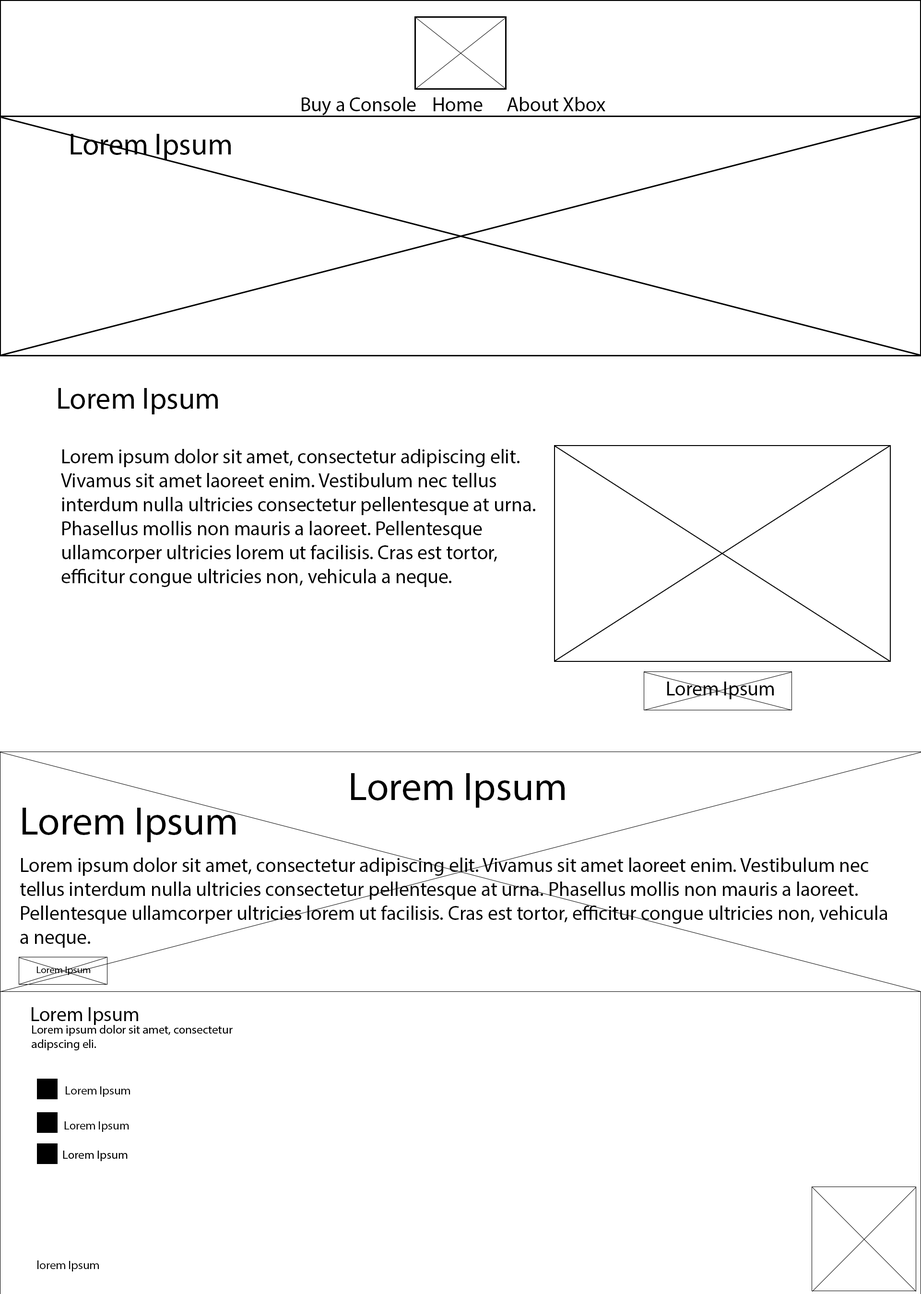
<style>
.page{position:relative;width:921px;height:1294px;background:#ffffff}
.page>*{position:absolute;margin:0}
.t1{font:20px "MyriadPro-Regular";color:#000000}
.t2{font:30px "MyriadPro-Regular";color:#000000}
.t3{font:40px "MyriadPro-Regular";color:#000000}
.t4{font:10px "MyriadPro-Regular";color:#000000}
.t5{font:12px "MyriadPro-Regular";color:#000000}
</style>
<div class="page">
<p class="t1" style="left:302px;top:97px;width:114px;height:19px">Buy a Console</p>
<p class="t1" style="left:434px;top:97px;width:49px;height:14px">Home</p>
<p class="t1" style="left:507px;top:97px;width:98px;height:14px">About Xbox</p>
<p class="t2" style="left:71px;top:134px;width:160px;height:26px">Lorem Ipsum</p>
<p class="t2" style="left:58px;top:388px;width:160px;height:27px">Lorem Ipsum</p>
<p class="t1" style="left:61px;top:449px;width:474px;height:138px">Lorem ipsum dolor sit amet, consectetur adipiscing elit. <br>Vivamus sit amet laoreet enim. Vestibulum nec tellus <br>interdum nulla ultricies consectetur pellentesque at urna.<br>Phasellus mollis non mauris a laoreet. Pellentesque <br>ullamcorper ultricies lorem ut facilisis. Cras est tortor, <br>efficitur congue ultricies non, vehicula a neque.</p>
<p class="t1" style="left:667px;top:682px;width:107px;height:18px">Lorem Ipsum</p>
<p class="t3" style="left:351px;top:773px;width:214px;height:35px">Lorem Ipsum</p>
<p class="t3" style="left:23px;top:808px;width:213px;height:34px">Lorem Ipsum</p>
<p class="t1" style="left:20px;top:858px;width:868px;height:90px">Lorem ipsum dolor sit amet, consectetur adipiscing elit. Vivamus sit amet laoreet enim. Vestibulum nec<br>tellus interdum nulla ultricies consectetur pellentesque at urna. Phasellus mollis non mauris a laoreet. Pellentesque ullamcorper ultricies lorem ut facilisis. Cras est tortor, efficitur congue ultricies non, vehicula <br>a neque.</p>
<p class="t4" style="left:36px;top:967px;width:55px;height:8px">Lorem Ipsum</p>
<p class="t1" style="left:32px;top:1008px;width:106px;height:17px">Lorem Ipsum</p>
<p class="t5" style="left:66px;top:1087px;width:64px;height:10px">Lorem Ipsum</p>
<p class="t5" style="left:64px;top:1122px;width:65px;height:10px">Lorem Ipsum</p>
<p class="t5" style="left:37px;top:1261px;width:62px;height:11px">lorem Ipsum</p>
</div>
